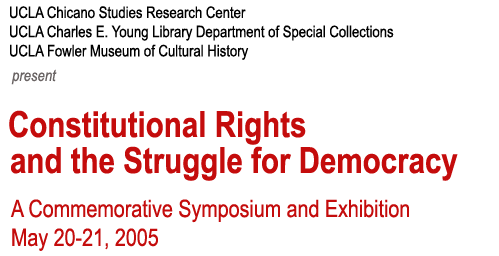
<style>
.page{position:relative;width:499px;height:256px;background:#ffffff}
.page>*{position:absolute;margin:0}
.t1{font:16px "ArialNarrow";color:#000000}
.t2{font:16px "ArialNarrow-Italic";color:#696363}
.t3{font:36px "ArialNarrow-Bold";color:#c40c0c}
.t4{font:24px "ArialNarrow";color:#c40c0c}
</style>
<div class="page">
<p class="t1" style="left:10px;top:6px;width:384px;height:54px">UCLA Chicano Studies Research Center<br>UCLA Charles E. Young Library Department of Special Collections<br>UCLA Fowler Museum of Cultural History</p>
<p class="t2" style="left:11px;top:69px;width:46px;height:16px">present</p>
<p class="t3" style="left:9px;top:110px;width:297px;height:35px">Constitutional Rights</p>
<p class="t3" style="left:11px;top:146px;width:447px;height:35px">and the Struggle for Democracy</p>
<p class="t4" style="left:10px;top:199px;width:399px;height:52px">A Commemorative Symposium and Exhibition<br>May 20-21, 2005</p>
</div>
